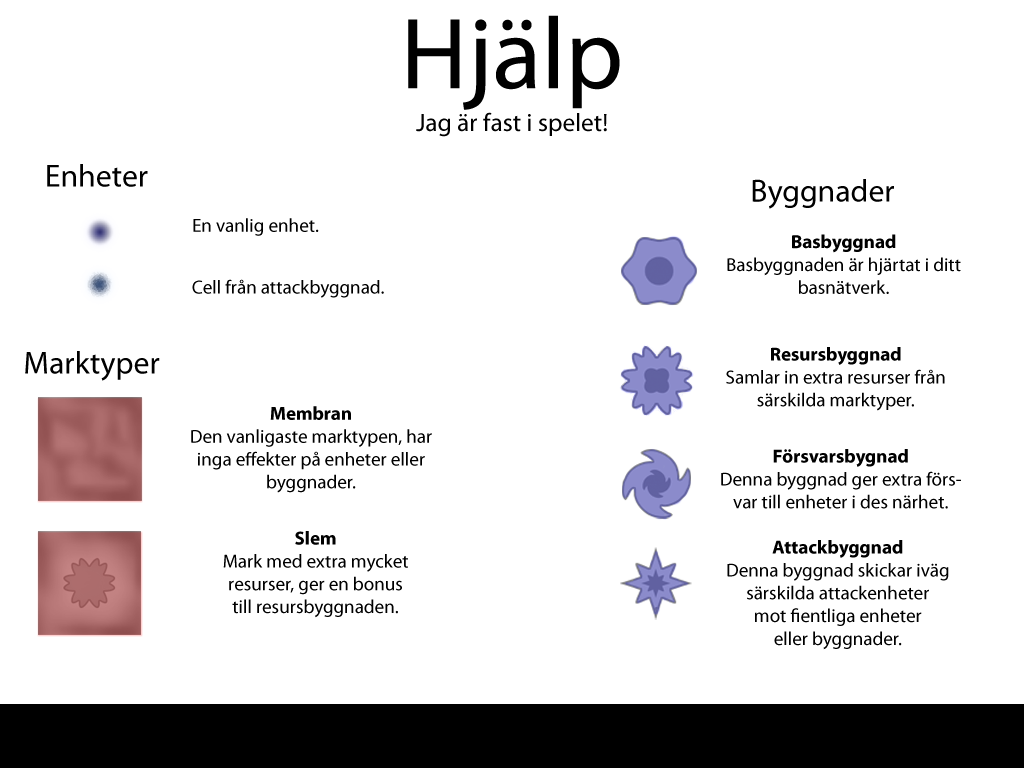
<style>
.page{position:relative;width:1024px;height:768px;background:#ffffff}
.page>*{position:absolute;margin:0}
.t1{font:101.6px "MyriadPro-Regular";color:#000000}
.t2{font:25.4px "MyriadPro-Regular";color:#000000}
.t3{font:31.7px "MyriadPro-Regular";color:#000000}
.t4{font:31.8px "MyriadPro-Regular";color:#000000}
.t5{font:19.1px "MyriadPro-Regular";color:#000000}
.t6{font:19.1px "MyriadPro-Bold";color:#000000}
</style>
<div class="page">
<p class="t1" style="left:408px;top:15px;width:212px;height:95px">Hjälp</p>
<p class="t2" style="left:416px;top:112px;width:191px;height:25px">Jag är fast i spelet!</p>
<p class="t3" style="left:47px;top:164px;width:101px;height:23px">Enheter</p>
<p class="t4" style="left:752px;top:179px;width:142px;height:30px">Byggnader</p>
<p class="t5" style="left:193px;top:218px;width:126px;height:18px">En vanlig enhet.</p>
<p class="t5" style="left:727px;top:234px;width:234px;height:60px;text-align:center"><span class="t6">Basbyggnad<br></span>Basbyggnaden är hjärtat i ditt basnätverk.</p>
<p class="t5" style="left:192px;top:279px;width:192px;height:19px">Cell från attackbyggnad.</p>
<p class="t4" style="left:25px;top:351px;width:135px;height:30px">Marktyper</p>
<p class="t5" style="left:726px;top:347px;width:219px;height:64px;text-align:center"><span class="t6">Resursbyggnad<br></span>Samlar in extra resurser från särskilda marktyper.</p>
<p class="t5" style="left:191px;top:406px;width:241px;height:87px;text-align:center"><span class="t6">Membran<br></span>Den vanligaste marktypen, har inga effekter på enheter eller byggnader.</p>
<p class="t5" style="left:721px;top:449px;width:240px;height:60px;text-align:center"><span class="t6">Försvarsbygnad<br></span>Denna byggnad ger extra försvar till enheter i des närhet.</p>
<p class="t5" style="left:223px;top:531px;width:185px;height:87px;text-align:center"><span class="t6">Slem<br></span>Mark med extra mycket <br>resurser, ger en bonus <br>till resursbyggnaden.</p>
<p class="t5" style="left:727px;top:540px;width:222px;height:110px;text-align:center"><span class="t6">Attackbyggnad<br></span>Denna byggnad skickar iväg särskilda attackenheter <br>mot fientliga enheter <br>eller byggnader.</p>
</div>
